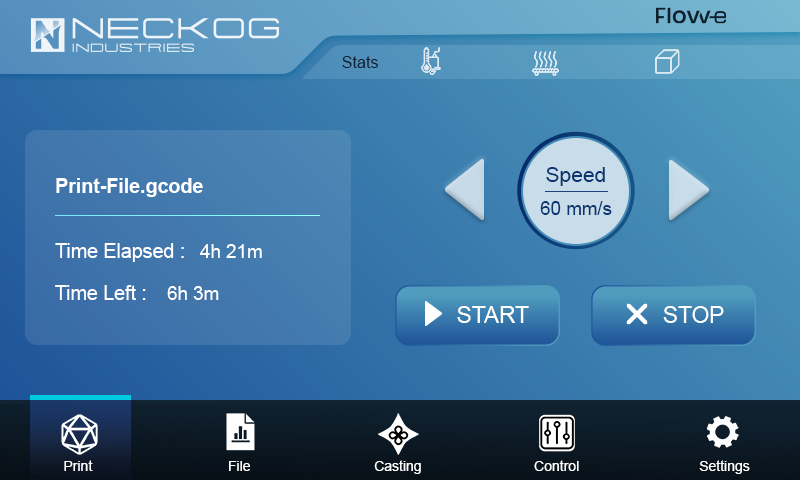
<style>
.page{position:relative;width:800px;height:480px}
.page>*{position:absolute;margin:0}
.t1{font:16.2px "ArialMT";color:#102130}
.t2{font:21px "ArialMT";color:#0a3470}
.t3{font:19.5px "Arial-BoldMT";color:#ffffff}
.t4{font:18.8px "ArialMT";color:#0b3672}
.t5{font:19.5px "ArialMT";color:#ffffff}
.t6{font:18.8px "ArialMT";color:#ffffff}
.t7{font:19.5px "ArialMT";color:#fefefe}
.t8{font:22.7px "ArialMT";color:#feffff}
.t9{font:14px "ArialMT";color:#ffffff}
</style>
<div class="page">
<p class="t1" style="left:342px;top:56px;width:36px;height:12px">Stats</p>
<p class="t2" style="left:546px;top:167px;width:59px;height:19px">Speed</p>
<p class="t3" style="left:56px;top:178px;width:147px;height:19px">Print-File.gcode</p>
<p class="t4" style="left:540px;top:201px;width:72px;height:14px">60 mm/s</p>
<p class="t5" style="left:55px;top:243px;width:129px;height:19px">Time Elapsed :</p>
<p class="t6" style="left:200px;top:244px;width:62px;height:14px">4h 21m</p>
<p class="t7" style="left:55px;top:285px;width:91px;height:15px">Time Left :</p>
<p class="t6" style="left:167px;top:286px;width:52px;height:14px">6h 3m</p>
<p class="t8" style="left:457px;top:306px;width:72px;height:17px">START</p>
<p class="t8" style="left:663px;top:306px;width:61px;height:17px">STOP</p>
<p class="t9" style="left:64px;top:460px;width:29px;height:11px">Print</p>
<p class="t9" style="left:229px;top:461px;width:21px;height:10px">File</p>
<p class="t9" style="left:374px;top:460px;width:47px;height:14px">Casting</p>
<p class="t9" style="left:534px;top:460px;width:45px;height:11px">Control</p>
<p class="t9" style="left:699px;top:460px;width:51px;height:14px">Settings</p>
</div>
